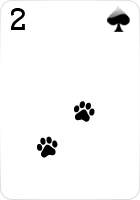
<style>
.page{position:relative;width:140px;height:200px;background:#ffffff}
.page>*{position:absolute;margin:0}
.t1{font:26px "CardCharacters";color:#000000}
</style>
<div class="page">
<p class="t1" style="left:11px;top:8px;width:14px;height:22px">2</p>
</div>
